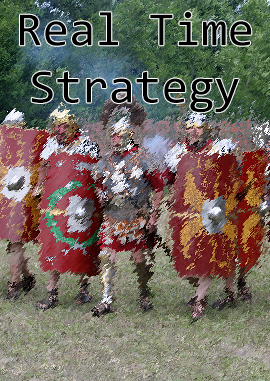
<style>
.page{position:relative;width:270px;height:381px}
.page>*{position:absolute;margin:0}
.t1{font:47.8px "Consolas";color:#000001}
</style>
<div class="page">
<p class="t1" style="left:20px;top:11px;width:232px;height:102px;text-align:center">Real Time<br>Strategy</p>
</div>
